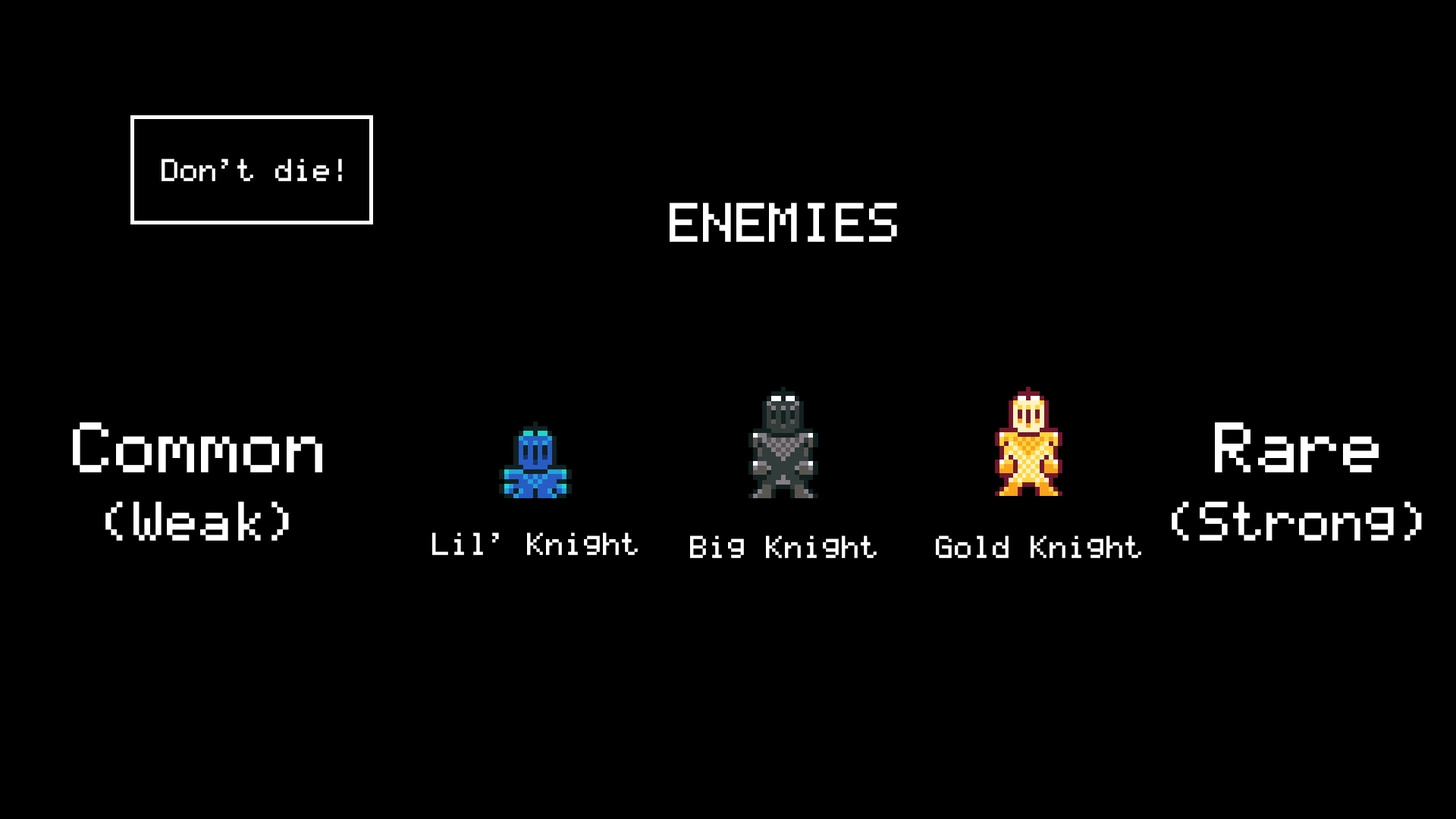
<style>
.page{position:relative;width:1456px;height:819px;background:#000000}
.page>*{position:absolute;margin:0}
.t1{font:25.3px "TI-83-Plus-Large";color:#ffffff}
.t2{font:44.2px "TI-83-Plus-Large";color:#ffffff}
.t3{font:56.9px "TI-83-Plus-Large";color:#ffffff}
</style>
<div class="page">
<p class="t1" style="left:162px;top:158px;width:180px;height:23px">Don’t die!</p>
<p class="t2" style="left:670px;top:202px;width:227px;height:40px">ENEMIES</p>
<p class="t3" style="left:73px;top:422px;width:249px;height:50px">Common</p>
<p class="t3" style="left:1215px;top:422px;width:164px;height:50px">Rare</p>
<p class="t2" style="left:105px;top:501px;width:184px;height:40px">(Weak)</p>
<p class="t2" style="left:1172px;top:501px;width:250px;height:40px">(Strong)</p>
<p class="t1" style="left:432px;top:532px;width:206px;height:23px">Lil’ Knight</p>
<p class="t1" style="left:690px;top:535px;width:187px;height:23px">Big Knight</p>
<p class="t1" style="left:936px;top:535px;width:205px;height:23px">Gold Knight</p>
</div>
